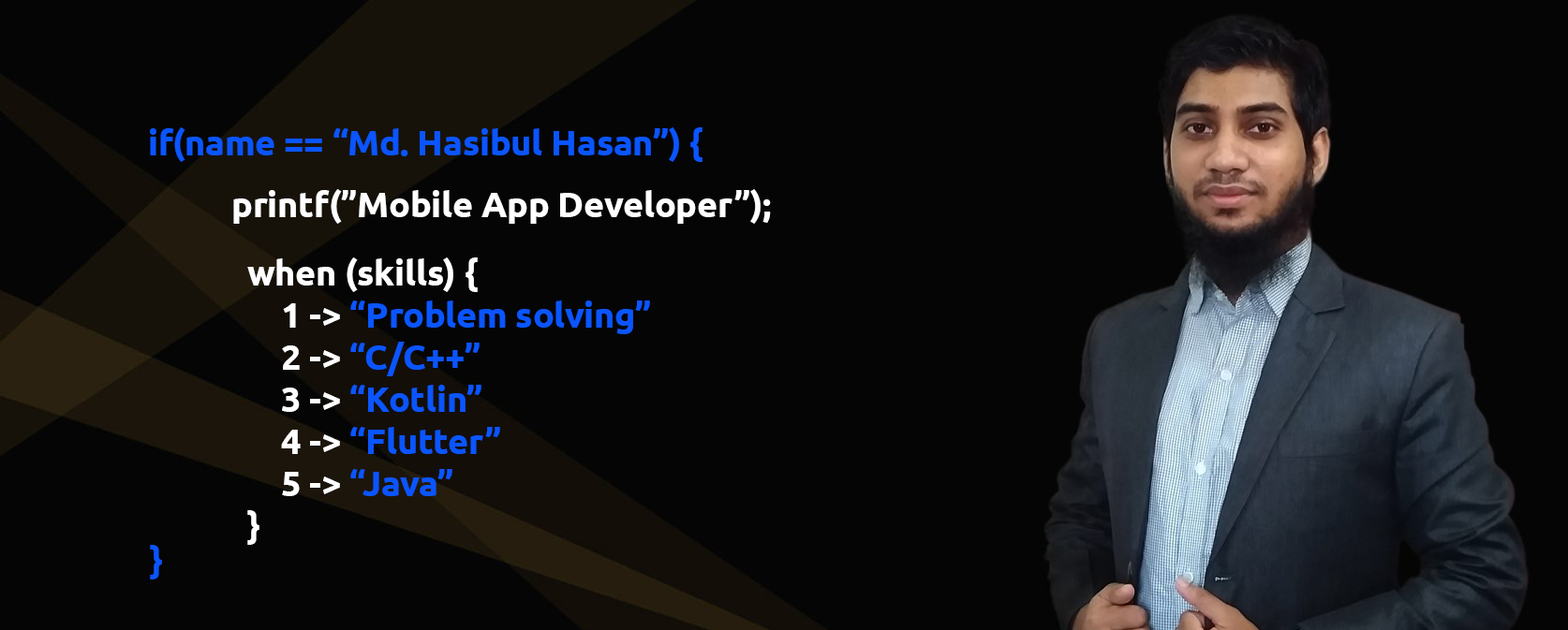
<style>
.page{position:relative;width:1568px;height:630px;background:#050505}
.page>*{position:absolute;margin:0}
.t1{font:35.1px "Ubuntu-Bold";color:#0a55ff}
.t2{font:35.1px "Ubuntu-Bold";color:#ffffff}
</style>
<div class="page">
<p class="t1" style="left:150px;top:127px;width:553px;height:35px">if(name == “Md. Hasibul Hasan”) {</p>
<p class="t2" style="left:233px;top:189px;width:538px;height:35px">printf(”Mobile App Developer”);</p>
<p class="t2" style="left:247px;top:258px;width:403px;height:287px">when (skills) {<br> 1 -&gt; <span class="t1">“Problem solving”<br></span> 2 -&gt; <span class="t1">“C/C++”<br></span> 3 -&gt; <span class="t1">“Kotlin”<br></span> 4 -&gt; <span class="t1">“Flutter”<br></span> 5 -&gt; <span class="t1">“Java”<br></span>}</p>
<p class="t1" style="left:150px;top:545px;width:12px;height:35px">}</p>
</div>
